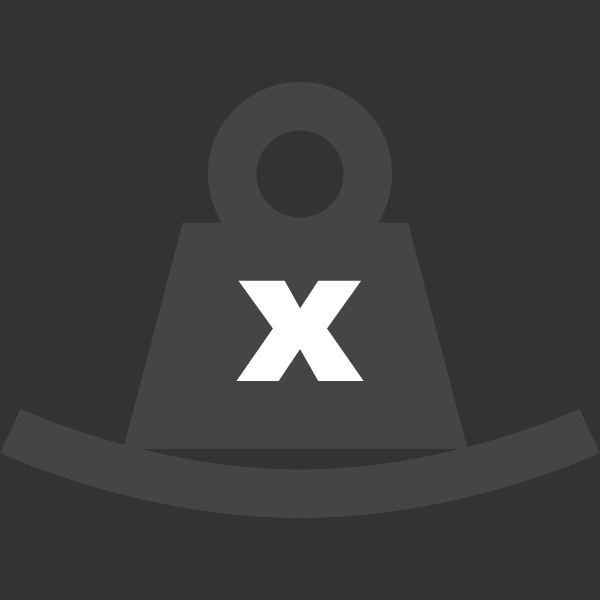
<style>
.page{position:relative;width:600px;height:600px;background:#333333}
.page>*{position:absolute;margin:0}
.t1{font:193.6px "Arial-Black";letter-spacing:0.02em;color:#ffffff}
</style>
<div class="page">
<p class="t1" style="left:236px;top:280px;width:128px;height:101px">x</p>
</div>
